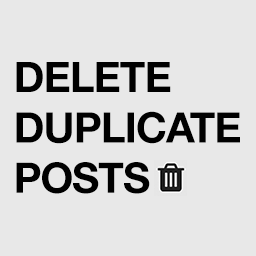
<style>
.page{position:relative;width:256px;height:256px;background:#e8e8e8}
.page>*{position:absolute;margin:0}
.t1{font:42px "HelveticaNeue-Bold";letter-spacing:-0.025em;color:#000000;text-transform:uppercase}
</style>
<div class="page">
<p class="t1" style="left:16px;top:62px;width:224px;height:132px">Delete<br>DUPLICATE<br>POSTS</p>
</div>
